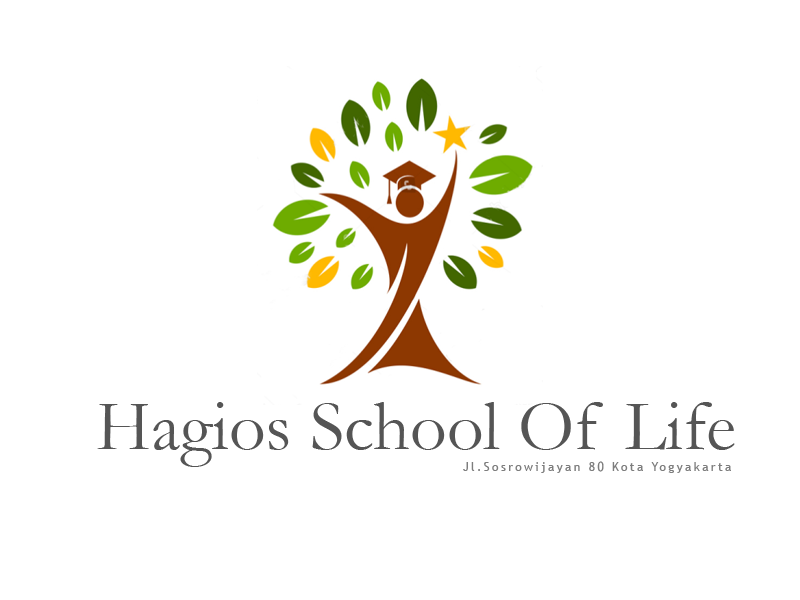
<style>
.page{position:relative;width:800px;height:600px;background:#ffffff}
.page>*{position:absolute;margin:0}
.t1{font:72px "Garamond";color:#555555}
.t2{font:12px "TrebuchetMS";letter-spacing:0.2em;color:#7d7d7d}
</style>
<div class="page">
<p class="t1" style="left:97px;top:402px;width:638px;height:65px">Hagios School Of Life</p>
<p class="t2" style="left:463px;top:461px;width:268px;height:12px">Jl.Sosrowijayan 80 Kota Yogyakarta</p>
</div>
